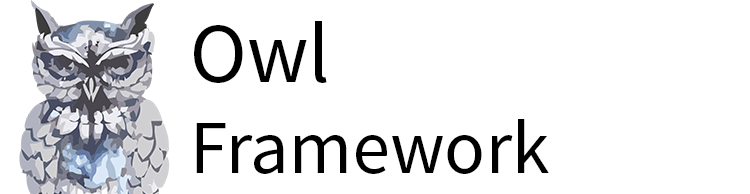
<style>
.page{position:relative;width:750px;height:194px;background:#ffffff}
.page>*{position:absolute;margin:0}
.t1{font:76px "SourceSansPro-Regular";color:#000000}
.t2{font:86px "SourceSansPro-Regular";color:#000000}
</style>
<div class="page">
<p class="t1" style="left:194px;top:21px;width:355px;height:153px"><span class="t2">Owl<br></span>Framework</p>
</div>
